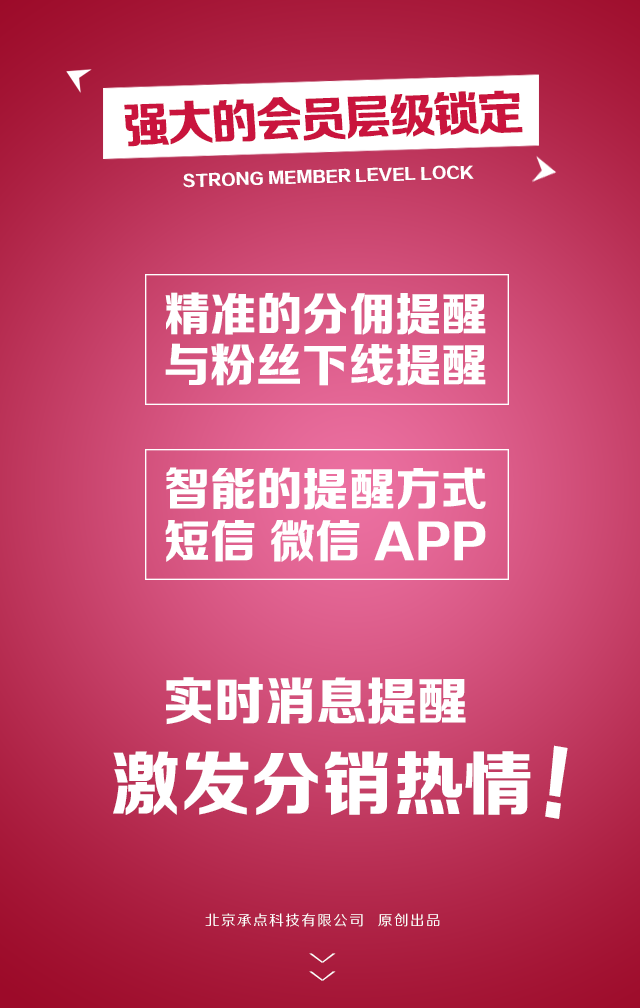
<style>
.page{position:relative;width:640px;height:1008px}
.page>*{position:absolute;margin:0}
.t1{font:48px "FZZDHJW--GB1-0";letter-spacing:-0.05em;color:#c9143d;text-transform:uppercase}
.t2{font:15.6px "FZZDHJW--GB1-0";letter-spacing:0.005em;color:#ffffff;text-transform:uppercase}
.t3{font:46.2px/51.4px "FZZDHJW--GB1-0";color:#ffffff;text-transform:uppercase}
.t4{font:51.9px "FZZDHJW--GB1-0";color:#ffffff;text-transform:uppercase}
.t5{font:84.6px "FZZDHJW--GB1-0";letter-spacing:0.005em;color:#ffffff;text-transform:uppercase;scale:0.86 1}
.t6{font:70.3px "FZZDHJW--GB1-0";letter-spacing:0.005em;color:#ffffff;text-transform:uppercase}
.t7{font:14.2px "FZZHJW--GB1-0";letter-spacing:0.1em;color:#ffffff;text-transform:uppercase}
.t8{font:36.8px "FZZXHJW--GB1-0";letter-spacing:0.5em;color:#ffffff;text-transform:uppercase;scale:0.44 1}
</style>
<div class="page">
<p class="t1" style="left:124px;top:90px;width:399px;height:57px;rotate:-2deg">强大的会员层级锁定</p>
<p class="t2" style="left:183px;top:165px;width:291px;height:23px;rotate:-2deg">Strong member level lock</p>
<p class="t3" style="left:165px;top:292px;width:321px;height:94px;text-align:center">精准的分佣提醒<br>与粉丝下线提醒</p>
<p class="t3" style="left:165px;top:467px;width:321px;height:95px;text-align:center">智能的提醒方式<br>短信 微信 APP</p>
<p class="t4" style="left:166px;top:677px;width:300px;height:48px">实时消息提醒</p>
<p class="t5" style="left:545px;top:745px;width:23px;height:74px;rotate:10deg">!</p>
<p class="t6" style="left:113px;top:751px;width:418px;height:64px">激发分销热情</p>
<p class="t7" style="left:205px;top:913px;width:235px;height:14px">北京承点科技有限公司  原创出品</p>
<p class="t8" style="left:309px;top:953px;width:27px;height:28px;rotate:90deg">&gt;&gt;</p>
</div>
